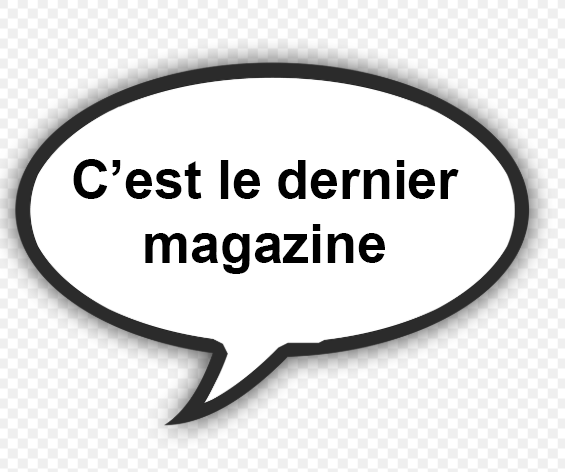
<style>
.page{position:relative;width:565px;height:472px;background:#ffffff}
.page>*{position:absolute;margin:0}
.t1{font:53.6px "Arial-BoldMT";color:#000000}
</style>
<div class="page">
<p class="t1" style="left:73px;top:159px;width:386px;height:115px;text-align:center">C’est le dernier<br>magazine</p>
</div>
